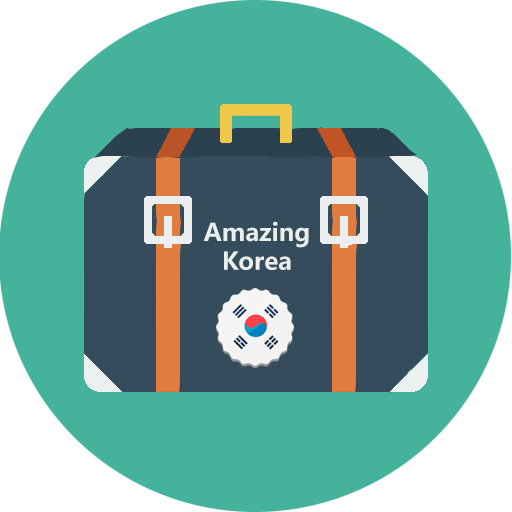
<style>
.page{position:relative;width:512px;height:512px;background:#45b39c}
.page>*{position:absolute;margin:0}
.t1{font:24px "MicrosoftYaHei-Bold";color:#ebeeee}
</style>
<div class="page">
<p class="t1" style="left:203px;top:221px;width:106px;height:49px;text-align:center">Amazing<br>Korea</p>
</div>
